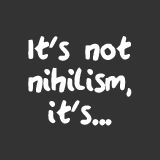
<style>
.page{position:relative;width:160px;height:160px;background:#333333}
.page>*{position:absolute;margin:0}
.t1{font:35.9px/31.9px "QAReports";color:#ffffff}
</style>
<div class="page">
<p class="t1" style="left:28px;top:36px;width:104px;height:90px;text-align:center">It's not<br>nihilism,<br>it's...</p>
</div>
